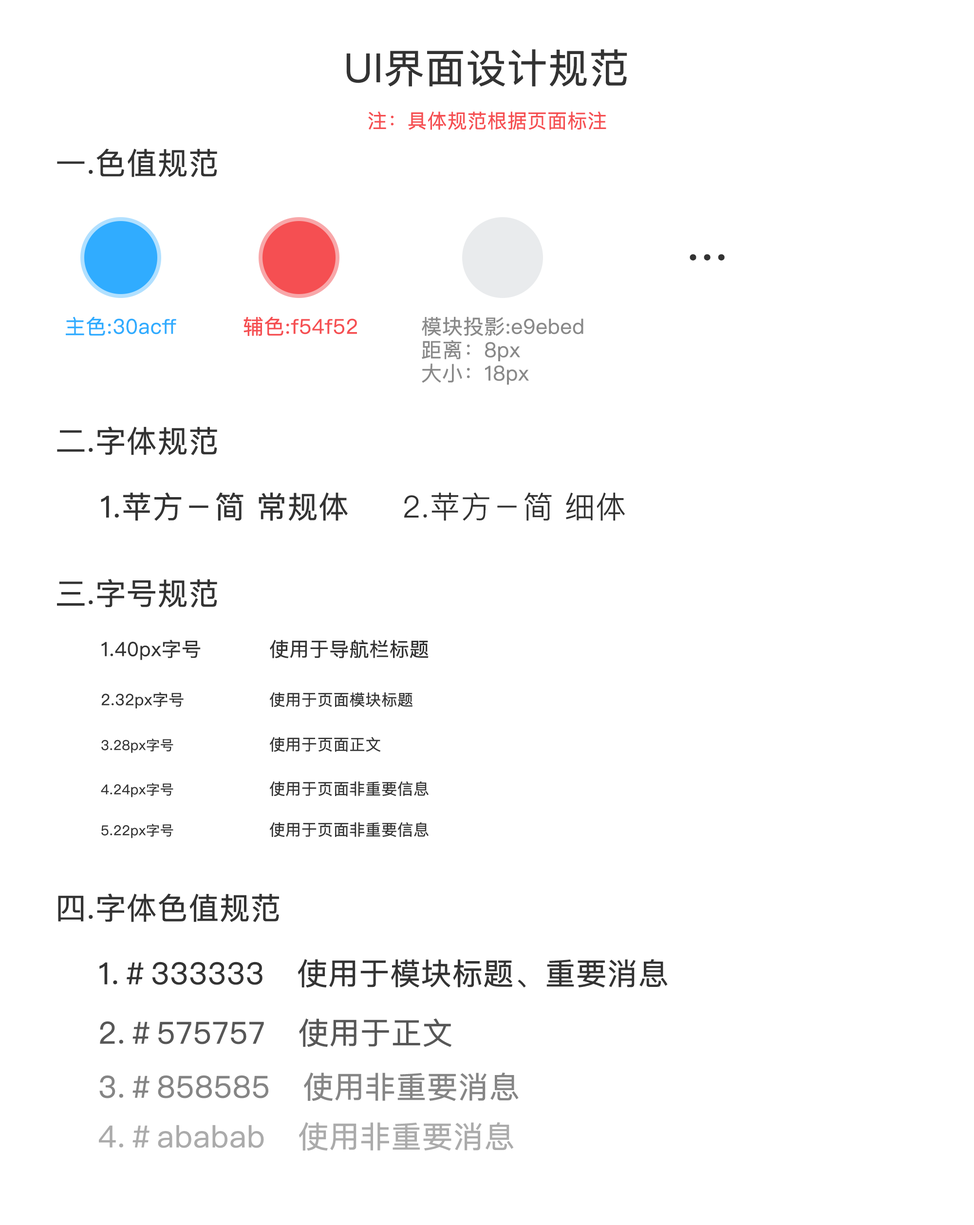
<style>
.page{position:relative;width:974px;height:1225px;background:#ffffff}
.page>*{position:absolute;margin:0}
.t1{font:39.9px "PingFangSC-Regular";color:#333333;font-weight:bold}
.t2{font:19.5px "PingFangSC-Regular";color:#f54f52;font-weight:bold}
.t3{font:30.2px "PingFangSC-Regular";color:#333333;font-weight:bold}
.t4{font:48.7px "PingFangSC-Regular";color:#333333;font-weight:bold}
.t5{font:20.4px "PingFangSC-Regular";color:#30acff;font-weight:bold}
.t6{font:20.4px "PingFangSC-Regular";color:#f54f52;font-weight:bold}
.t7{font:20.4px/11.7px "PingFangSC-Regular";color:#898989;font-weight:bold}
.t8{font:30.2px "PingFangSC-Light";color:#333333;font-weight:bold}
.t9{font:19.5px "PingFangSC-Regular";color:#333333;font-weight:bold}
.t10{font:15.6px "PingFangSC-Regular";color:#333333;font-weight:bold}
.t11{font:13.6px "PingFangSC-Regular";color:#333333;font-weight:bold}
.t12{font:30.2px "PingFangSC-Regular";color:#575757;font-weight:bold}
.t13{font:30.2px "PingFangSC-Regular";color:#858585;font-weight:bold}
.t14{font:30.2px "PingFangSC-Regular";color:#ababab;font-weight:bold}
</style>
<div class="page">
<p class="t1" style="left:346px;top:49px;width:281px;height:38px">UI界面设计规范</p>
<p class="t2" style="left:368px;top:111px;width:238px;height:19px">注：具体规范根据页面标注</p>
<p class="t3" style="left:57px;top:148px;width:160px;height:29px">一.色值规范</p>
<p class="t4" style="left:689px;top:254px;width:35px;height:6px">...</p>
<p class="t5" style="left:66px;top:316px;width:110px;height:20px">主色:30acff</p>
<p class="t6" style="left:243px;top:316px;width:114px;height:20px">辅色:f54f52</p>
<p class="t7" style="left:422px;top:316px;width:161px;height:69px">模块投影:e9ebed<br><br>距离：8px<br><br>大小：18px</p>
<p class="t3" style="left:57px;top:426px;width:160px;height:29px">二.字体规范</p>
<p class="t3" style="left:101px;top:492px;width:247px;height:29px">1.苹方－简 常规体</p>
<p class="t8" style="left:404px;top:492px;width:221px;height:29px">2.苹方－简 细体</p>
<p class="t3" style="left:57px;top:579px;width:160px;height:29px">三.字号规范</p>
<p class="t9" style="left:101px;top:640px;width:100px;height:20px">1.40px字号</p>
<p class="t9" style="left:270px;top:640px;width:158px;height:18px">使用于导航栏标题</p>
<p class="t10" style="left:101px;top:692px;width:83px;height:16px">2.32px字号</p>
<p class="t10" style="left:270px;top:692px;width:142px;height:15px">使用于页面模块标题</p>
<p class="t10" style="left:270px;top:737px;width:111px;height:15px">使用于页面正文</p>
<p class="t11" style="left:101px;top:738px;width:72px;height:15px">3.28px字号</p>
<p class="t11" style="left:101px;top:783px;width:72px;height:14px">4.24px字号</p>
<p class="t10" style="left:270px;top:781px;width:158px;height:15px">使用于页面非重要信息</p>
<p class="t10" style="left:270px;top:822px;width:158px;height:15px">使用于页面非重要信息</p>
<p class="t11" style="left:101px;top:824px;width:72px;height:14px">5.22px字号</p>
<p class="t3" style="left:58px;top:893px;width:221px;height:29px">四.字体色值规范</p>
<p class="t3" style="left:99px;top:959px;width:568px;height:29px">1.＃333333   使用于模块标题、重要消息</p>
<p class="t12" style="left:100px;top:1018px;width:351px;height:29px">2.＃575757   使用于正文</p>
<p class="t13" style="left:99px;top:1072px;width:419px;height:29px">3.＃858585   使用非重要消息</p>
<p class="t14" style="left:99px;top:1122px;width:415px;height:29px">4.＃ababab   使用非重要消息</p>
</div>
